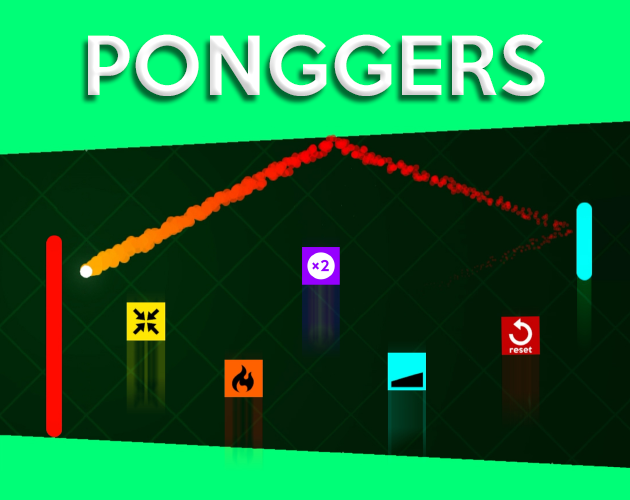
<style>
.page{position:relative;width:630px;height:500px;background:#00fe77}
.page>*{position:absolute;margin:0}
.t1{font:73.9px "KeepCalm-Medium";letter-spacing:0.025em;color:#ffffff}
</style>
<div class="page">
<p class="t1" style="left:88px;top:34px;width:457px;height:62px">PONGGERS</p>
</div>
